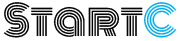
<style>
.page{position:relative;width:180px;height:41px;background:#ffffff}
.page>*{position:absolute;margin:0}
.t1{font:40px "Monoton-Regular";color:#000000}
.t2{font:40px "Monoton-Regular";color:#00aeef}
</style>
<div class="page">
<p class="t1" style="left:3px;top:2px;width:174px;height:36px">Start<span class="t2">C</span></p>
</div>
